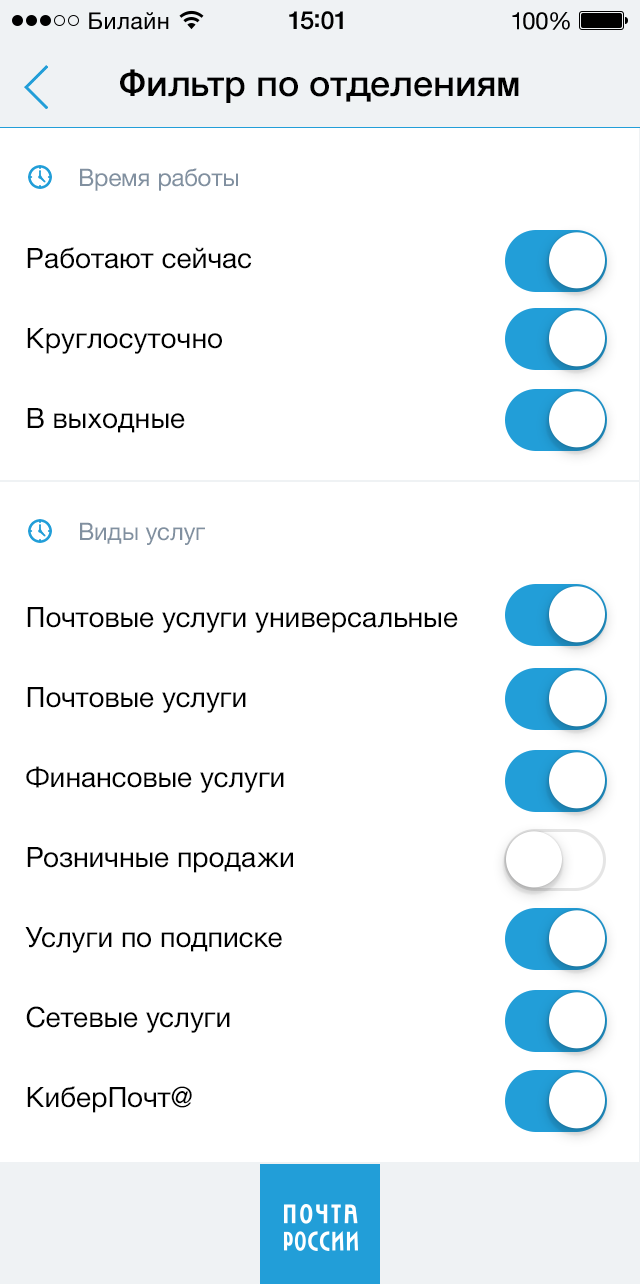
<style>
.page{position:relative;width:640px;height:1284px;background:#ffffff}
.page>*{position:absolute;margin:0}
.t1{font:36px "HelveticaNeue-Medium";color:#000000}
.t2{font:24px "HelveticaNeue";color:#8190a0}
.t3{font:28px "HelveticaNeue";color:#000000}
.t4{font:28px/40px "HelveticaNeue";color:#000000}
</style>
<div class="page">
<p class="t1" style="left:120px;top:69px;width:399px;height:34px">Фильтр по отделениям</p>
<p class="t2" style="left:80px;top:168px;width:158px;height:23px">Время работы</p>
<p class="t3" style="left:27px;top:247px;width:225px;height:22px">Работают сейчас</p>
<p class="t3" style="left:27px;top:328px;width:195px;height:26px">Круглосуточно</p>
<p class="t3" style="left:27px;top:408px;width:158px;height:25px">В выходные</p>
<p class="t2" style="left:80px;top:522px;width:125px;height:23px">Виды услуг</p>
<p class="t4" style="left:25px;top:607px;width:433px;height:506px">Почтовые услуги универсальные<br>Почтовые услуги<br>Финансовые услуги<br>Розничные продажи<br>Услуги по подписке<br>Сетевые услуги<br>КиберПочт@</p>
</div>
